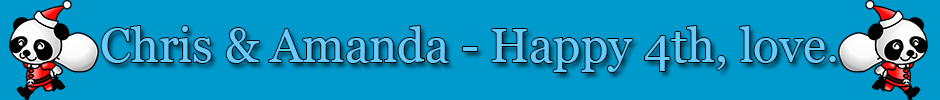
<style>
.page{position:relative;width:940px;height:100px;background:#0099cc}
.page>*{position:absolute;margin:0}
.t1{font:48px "Georgia";color:#66ccff}
</style>
<div class="page">
<p class="t1" style="left:101px;top:26px;width:735px;height:46px">Chris &amp; Amanda - Happy 4th, love.</p>
</div>
